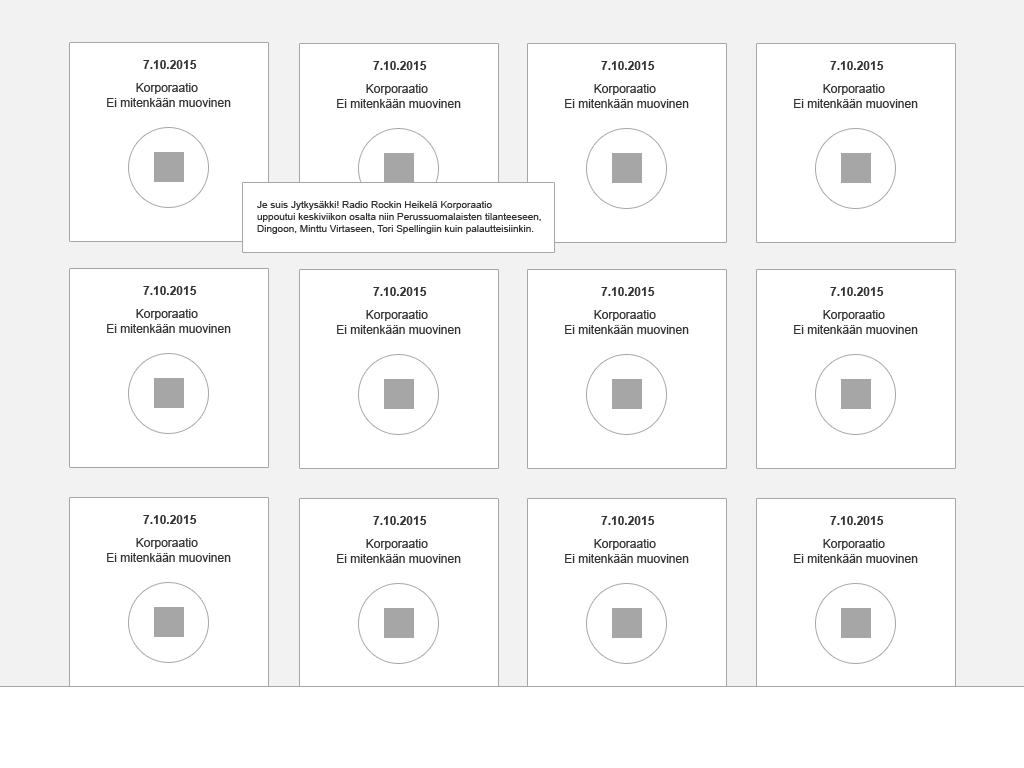
<style>
.page{position:relative;width:1024px;height:768px;background:#ffffff}
.page>*{position:absolute;margin:0}
.t1{font:12px "Arial-BoldMT";color:#333333}
.t2{font:12px "ArialMT";color:#333333}
.t3{font:10px "ArialMT";color:#333333}
</style>
<div class="page">
<p class="t1" style="left:143px;top:60px;width:54px;height:9px">7.10.2015</p>
<p class="t1" style="left:373px;top:61px;width:54px;height:9px">7.10.2015</p>
<p class="t1" style="left:601px;top:61px;width:54px;height:9px">7.10.2015</p>
<p class="t1" style="left:830px;top:61px;width:54px;height:9px">7.10.2015</p>
<p class="t2" style="left:107px;top:83px;width:124px;height:24px;text-align:center">Korporaatio <br>Ei mitenkään muovinen</p>
<p class="t2" style="left:337px;top:84px;width:124px;height:24px;text-align:center">Korporaatio <br>Ei mitenkään muovinen</p>
<p class="t2" style="left:565px;top:84px;width:124px;height:24px;text-align:center">Korporaatio <br>Ei mitenkään muovinen</p>
<p class="t2" style="left:794px;top:84px;width:124px;height:24px;text-align:center">Korporaatio <br>Ei mitenkään muovinen</p>
<p class="t3" style="left:257px;top:201px;width:284px;height:33px">Je suis Jytkysäkki! Radio Rockin Heikelä Korporaatio <br>uppoutui keskiviikon osalta niin Perussuomalaisten tilanteeseen, <br>Dingoon, Minttu Virtaseen, Tori Spellingiin kuin palautteisiinkin.</p>
<p class="t1" style="left:143px;top:286px;width:54px;height:9px">7.10.2015</p>
<p class="t1" style="left:373px;top:287px;width:54px;height:9px">7.10.2015</p>
<p class="t1" style="left:601px;top:287px;width:54px;height:9px">7.10.2015</p>
<p class="t1" style="left:830px;top:287px;width:54px;height:9px">7.10.2015</p>
<p class="t2" style="left:107px;top:309px;width:124px;height:24px;text-align:center">Korporaatio <br>Ei mitenkään muovinen</p>
<p class="t2" style="left:337px;top:310px;width:124px;height:24px;text-align:center">Korporaatio <br>Ei mitenkään muovinen</p>
<p class="t2" style="left:565px;top:310px;width:124px;height:24px;text-align:center">Korporaatio <br>Ei mitenkään muovinen</p>
<p class="t2" style="left:794px;top:310px;width:124px;height:24px;text-align:center">Korporaatio <br>Ei mitenkään muovinen</p>
<p class="t1" style="left:143px;top:515px;width:54px;height:9px">7.10.2015</p>
<p class="t1" style="left:373px;top:516px;width:54px;height:9px">7.10.2015</p>
<p class="t1" style="left:601px;top:516px;width:54px;height:9px">7.10.2015</p>
<p class="t1" style="left:830px;top:516px;width:54px;height:9px">7.10.2015</p>
<p class="t2" style="left:107px;top:538px;width:124px;height:24px;text-align:center">Korporaatio <br>Ei mitenkään muovinen</p>
<p class="t2" style="left:337px;top:539px;width:124px;height:24px;text-align:center">Korporaatio <br>Ei mitenkään muovinen</p>
<p class="t2" style="left:565px;top:539px;width:124px;height:24px;text-align:center">Korporaatio <br>Ei mitenkään muovinen</p>
<p class="t2" style="left:794px;top:539px;width:124px;height:24px;text-align:center">Korporaatio <br>Ei mitenkään muovinen</p>
</div>
